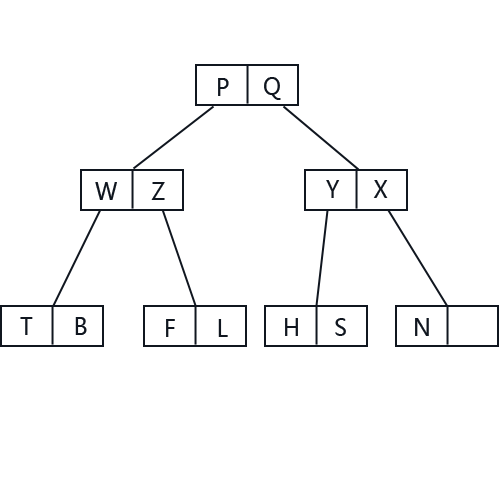
<style>
.page{position:relative;width:500px;height:500px;background:#ffffff}
.page>*{position:absolute;margin:0}
.t1{font:24px "MicrosoftYaHei";letter-spacing:0.02em;color:#10161f;scale:0.9 1}
</style>
<div class="page">
<p class="t1" style="left:218px;top:78px;width:11px;height:18px">P</p>
<p class="t1" style="left:264px;top:77px;width:17px;height:23px">Q</p>
<p class="t1" style="left:95px;top:182px;width:70px;height:18px">W     Z</p>
<p class="t1" style="left:326px;top:180px;width:62px;height:18px">Y     X</p>
<p class="t1" style="left:20px;top:317px;width:67px;height:18px">T      B</p>
<p class="t1" style="left:285px;top:318px;width:61px;height:18px">H     S</p>
<p class="t1" style="left:415px;top:318px;width:14px;height:18px">N</p>
<p class="t1" style="left:166px;top:319px;width:62px;height:18px">F      L</p>
</div>
